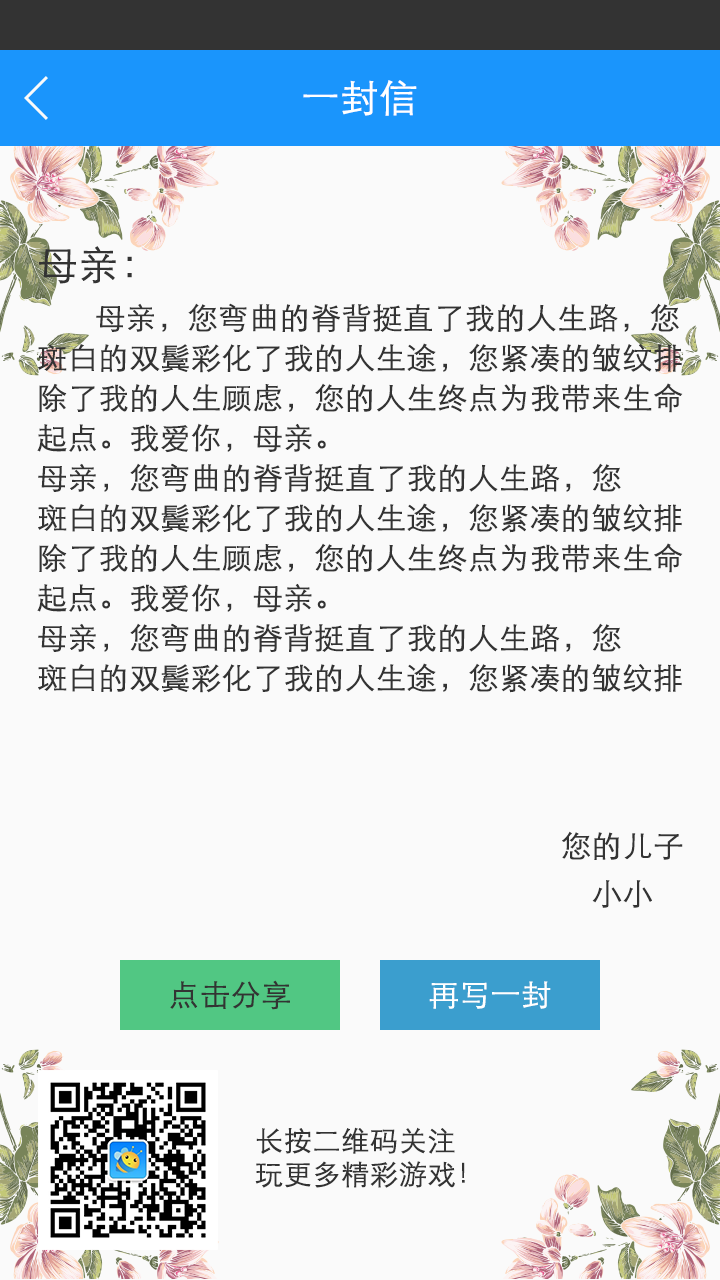
<style>
.page{position:relative;width:720px;height:1280px;background:#fafafa}
.page>*{position:absolute;margin:0}
.t1{font:38px "STXihei";color:#ffffff;font-weight:bold}
.t2{font:40px "STXihei";color:#333333;font-weight:bold}
.t3{font:30px/40px "STXihei";color:#333333;font-weight:bold}
.t4{font:30px "STXihei";color:#333333;font-weight:bold}
.t5{font:30px "STXihei";color:#ffffff;font-weight:bold}
.t6{font:28px "STXihei";color:#333333;font-weight:bold}
</style>
<div class="page">
<p class="t1" style="left:303px;top:80px;width:114px;height:36px">一封信</p>
<p class="t2" style="left:39px;top:246px;width:93px;height:38px">母亲：</p>
<p class="t3" style="left:37px;top:303px;width:646px;height:390px">母亲，您弯曲的脊背挺直了我的人生路，您<br>斑白的双鬓彩化了我的人生途，您紧凑的皱纹排<br>除了我的人生顾虑，您的人生终点为我带来生命<br>起点。我爱你，母亲。<br>母亲，您弯曲的脊背挺直了我的人生路，您<br>斑白的双鬓彩化了我的人生途，您紧凑的皱纹排<br>除了我的人生顾虑，您的人生终点为我带来生命<br>起点。我爱你，母亲。<br>母亲，您弯曲的脊背挺直了我的人生路，您<br>斑白的双鬓彩化了我的人生途，您紧凑的皱纹排</p>
<p class="t4" style="left:562px;top:831px;width:121px;height:29px">您的儿子</p>
<p class="t4" style="left:592px;top:880px;width:60px;height:28px">小小</p>
<p class="t4" style="left:170px;top:980px;width:120px;height:30px">点击分享</p>
<p class="t5" style="left:429px;top:981px;width:122px;height:28px">再写一封</p>
<p class="t6" style="left:255px;top:1127px;width:210px;height:61px">长按二维码关注<br>玩更多精彩游戏！</p>
</div>
